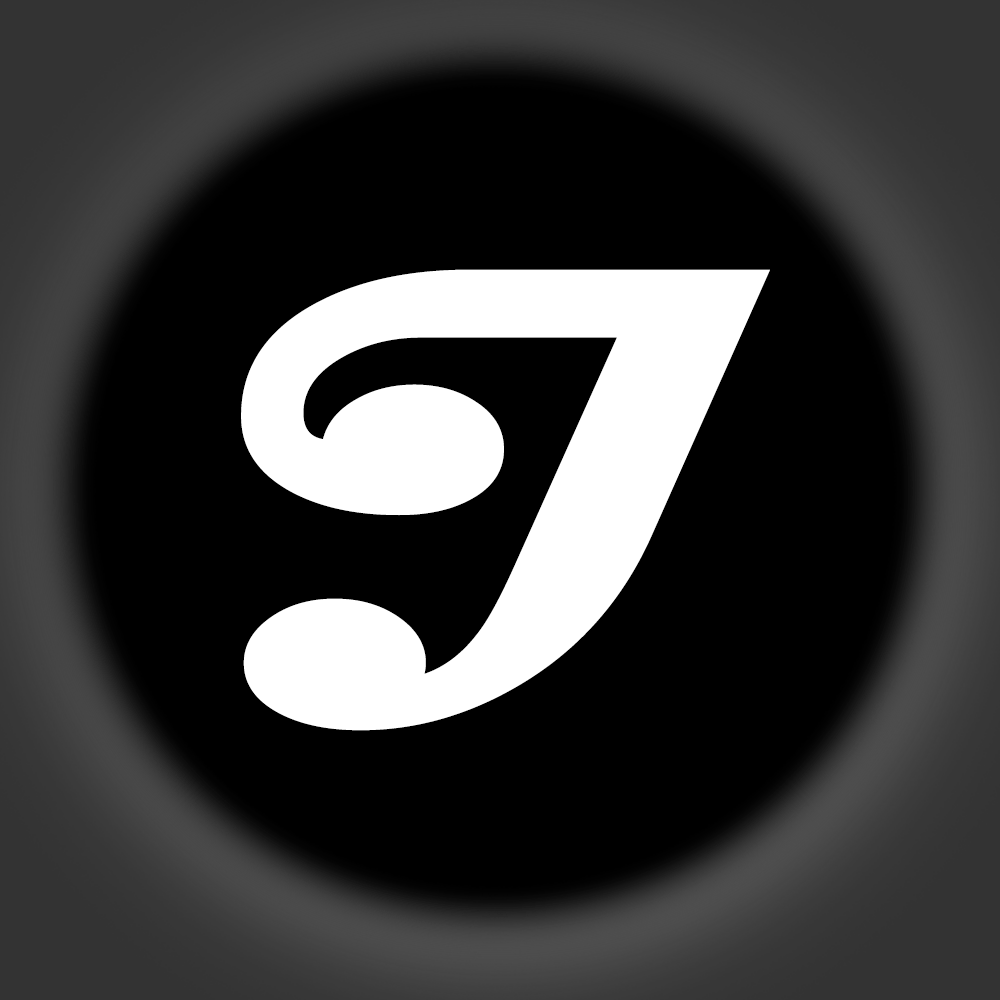
<style>
.page{position:relative;width:1000px;height:1000px;background:#000000}
.page>*{position:absolute;margin:0}
.t1{font:550px "Magneto-Bold";letter-spacing:-0.12em;color:#ffffff;scale:1.27 1}
</style>
<div class="page">
<p class="t1" style="left:241px;top:269px;width:529px;height:462px">J</p>
</div>
